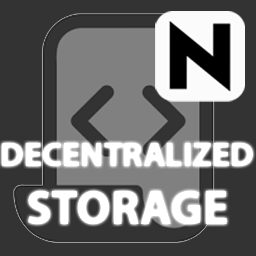
<style>
.page{position:relative;width:256px;height:256px;background:#333333}
.page>*{position:absolute;margin:0}
.t1{font:34px "MyriadPro-Bold";color:#ffffff}
.t2{font:48px "MyriadPro-Bold";color:#ffffff}
</style>
<div class="page">
<p class="t1" style="left:2px;top:143px;width:251px;height:81px;text-align:center">DECENTRALIZED<br><span class="t2">STORAGE</span></p>
</div>
